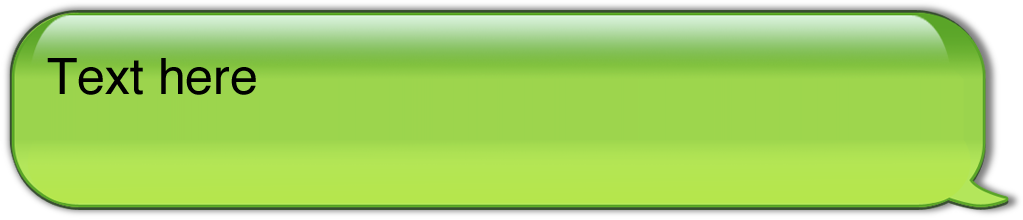
<style>
.page{position:relative;width:1023px;height:220px}
.page>*{position:absolute;margin:0}
.t1{font:50px "Helvetica";color:#000000}
</style>
<div class="page">
<p class="t1" style="left:47px;top:58px;width:209px;height:37px">Text here</p>
</div>
